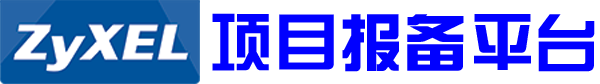
<style>
.page{position:relative;width:600px;height:84px;background:#ffffff}
.page>*{position:absolute;margin:0}
.t1{font:64px "FZZYK--GBK1-0";letter-spacing:0.02em;color:#0000ff}
</style>
<div class="page">
<p class="t1" style="left:212px;top:13px;width:383px;height:59px">项目报备平台</p>
</div>
